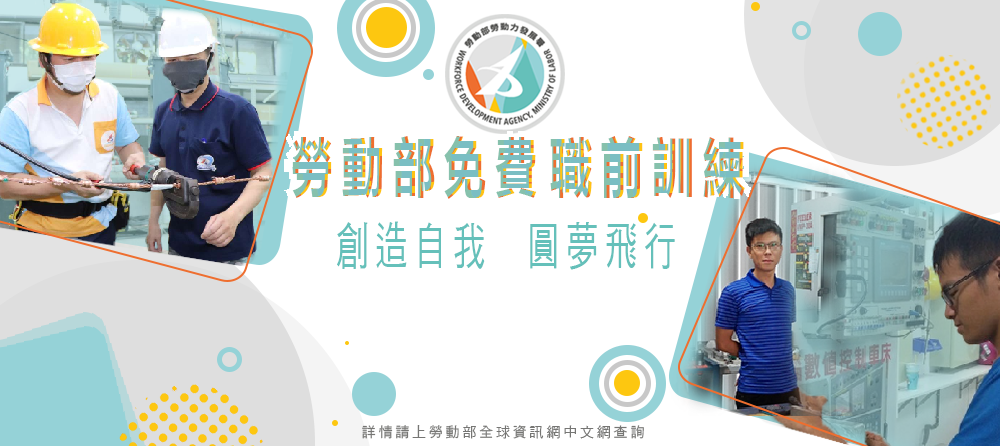
<style>
.page{position:relative;width:1000px;height:446px;background:#ffffff}
.page>*{position:absolute;margin:0}
.t1{font:65.1px "MicrosoftYaHei-Bold";letter-spacing:0.2em;scale:0.65 1}
.t2{font:50.9px "DFHei-W5-WINP-BF";letter-spacing:0.2em;color:#65c0ba;scale:0.64 1}
.t3{font:14px "DFHei-W5-WINP-BF";letter-spacing:0.2em;color:#767674}
</style>
<div class="page">
<p class="t1" style="left:292px;top:136px;width:453px;height:63px">勞動部免費職前訓練</p>
<p class="t2" style="left:337px;top:221px;width:338px;height:49px">創造自我  圓夢飛行</p>
<p class="t3" style="left:362px;top:425px;width:282px;height:14px">詳情請上勞動部全球資訊網中文網查詢</p>
</div>
